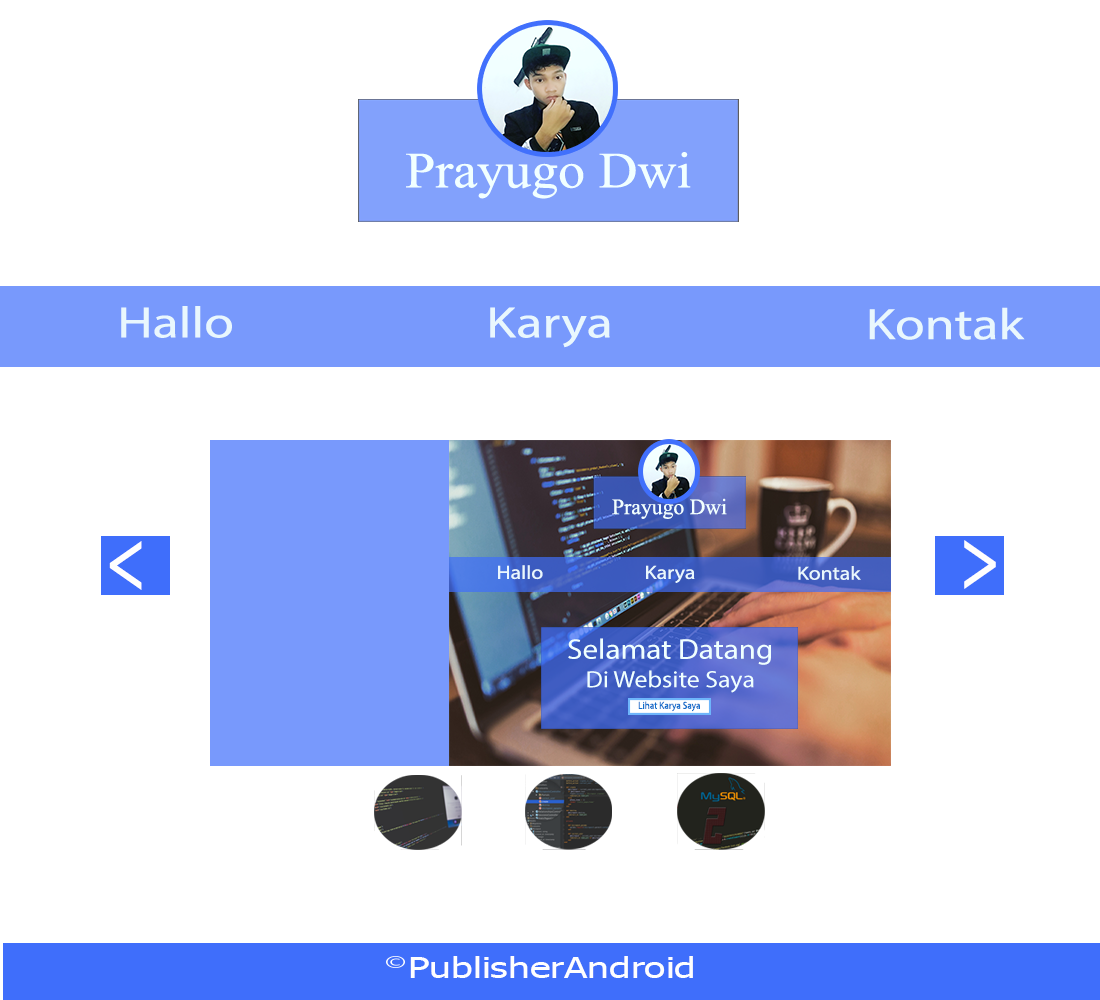
<style>
.page{position:relative;width:1100px;height:1000px;background:#ffffff}
.page>*{position:absolute;margin:0}
.t1{font:50.8px "MongolianBaiti";color:#f1ffff;scale:1.06 1}
.t2{font:44px "MyriadPro-Regular";color:#e9f7fd;scale:1.23 1}
.t3{font:21.9px "MongolianBaiti";color:#f1ffff}
.t4{font:85.8px "Tahoma";color:#fefefe;scale:0.71 1}
.t5{font:19px "MyriadPro-Regular";color:#e9f7fd;scale:1.14 1}
.t6{font:23.8px "MyriadPro-Regular";color:#efffff;scale:1.09 1}
.t7{font:28.5px "MyriadPro-Regular";color:#efffff;scale:1.09 1}
.t8{font:10.2px "MyriadPro-Regular";color:#126fcb;scale:0.9 1}
.t9{font:28.9px "Tahoma";color:#fefefe;scale:1.35 1}
</style>
<div class="page">
<p class="t1" style="left:406px;top:152px;width:285px;height:47px">Prayugo Dwi</p>
<p class="t2" style="left:121px;top:306px;width:111px;height:32px">Hallo</p>
<p class="t2" style="left:490px;top:307px;width:120px;height:41px">Karya</p>
<p class="t2" style="left:869px;top:307px;width:156px;height:33px">Kontak</p>
<p class="t3" style="left:612px;top:498px;width:115px;height:21px">Prayugo Dwi</p>
<p class="t4" style="left:109px;top:541px;width:33px;height:49px">&lt;</p>
<p class="t4" style="left:964px;top:540px;width:32px;height:49px">&gt;</p>
<p class="t5" style="left:498px;top:565px;width:45px;height:15px">Hallo</p>
<p class="t5" style="left:646px;top:565px;width:49px;height:18px">Karya</p>
<p class="t5" style="left:798px;top:566px;width:63px;height:14px">Kontak</p>
<p class="t6" style="left:568px;top:638px;width:203px;height:55px;text-align:center"><span class="t7">Selamat Datang<br></span>Di Website Saya</p>
<p class="t8" style="left:638px;top:701px;width:62px;height:11px">Lihat Karya Saya</p>
<p class="t9" style="left:410px;top:956px;width:283px;height:22px">PublisherAndroid</p>
</div>
